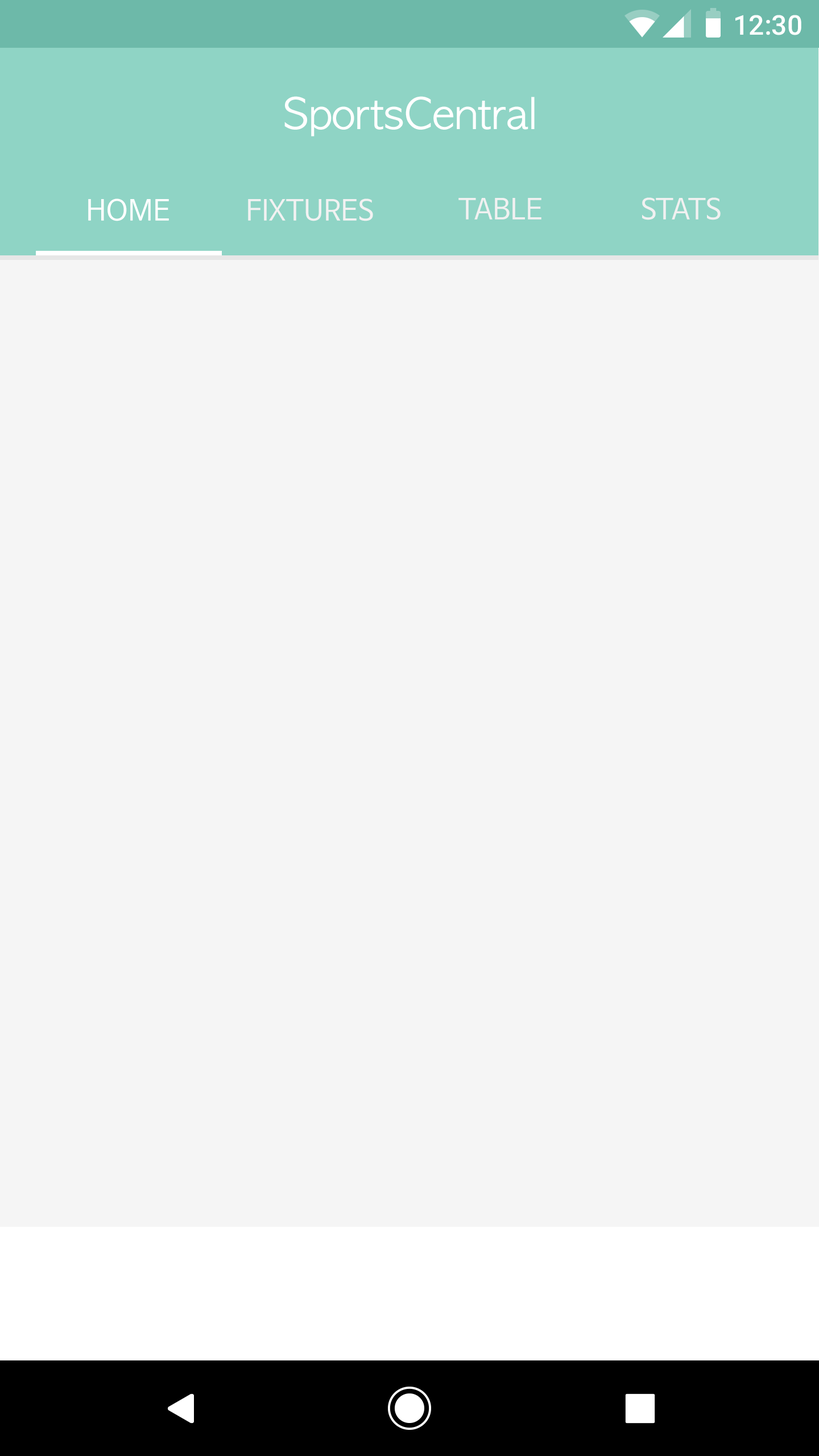
<style>
.page{position:relative;width:819px;height:1456px;background:#f5f5f5}
.page>*{position:absolute;margin:0}
.t1{font:27.3px "Roboto-Medium";color:#ffffff}
.t2{font:40.9px "AppleGothic";color:#ffffff}
.t3{font:28.4px "NanumBarunGothicOTF";color:#f1f1f1}
.t4{font:28.4px "NanumBarunGothicOTF";color:#ffffff}
.t5{font:28.4px "NanumBarunGothicOTF";color:#f2f2f2}
</style>
<div class="page">
<p class="t1" style="left:735px;top:15px;width:66px;height:20px">12:30</p>
<p class="t2" style="left:284px;top:96px;width:251px;height:40px">SportsCentral</p>
<p class="t3" style="left:458px;top:198px;width:83px;height:22px">TABLE</p>
<p class="t3" style="left:642px;top:197px;width:79px;height:23px">STATS</p>
<p class="t4" style="left:88px;top:198px;width:81px;height:23px">HOME</p>
<p class="t5" style="left:248px;top:198px;width:125px;height:23px">FIXTURES</p>
</div>
